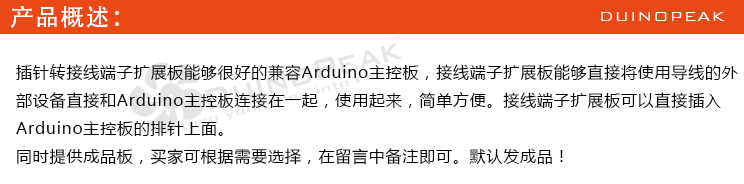
<style>
.page{position:relative;width:744px;height:184px;background:#ffffff}
.page>*{position:absolute;margin:0}
.t1{font:24px "AdobeHeitiStd-Regular";letter-spacing:0.05em;color:#ffffff}
.t2{font:18px "BankGothicBT-Light";letter-spacing:0.05em;color:#ffffff}
.t3{font:16px "MicrosoftYaHei";letter-spacing:0.05em;color:#000000}
</style>
<div class="page">
<p class="t1" style="left:10px;top:6px;width:109px;height:23px">产品概述：</p>
<p class="t2" style="left:601px;top:12px;width:124px;height:9px">DUINOPEAK</p>
<p class="t3" style="left:16px;top:64px;width:722px;height:101px">插针转接线端子扩展板能够很好的兼容Arduino主控板，接线端子扩展板能够直接将使用导线的外<br>部设备直接和Arduino主控板连接在一起，使用起来，简单方便。接线端子扩展板可以直接插入<br>Arduino主控板的排针上面。<br>同时提供成品板，买家可根据需要选择，在留言中备注即可。默认发成品！</p>
</div>
